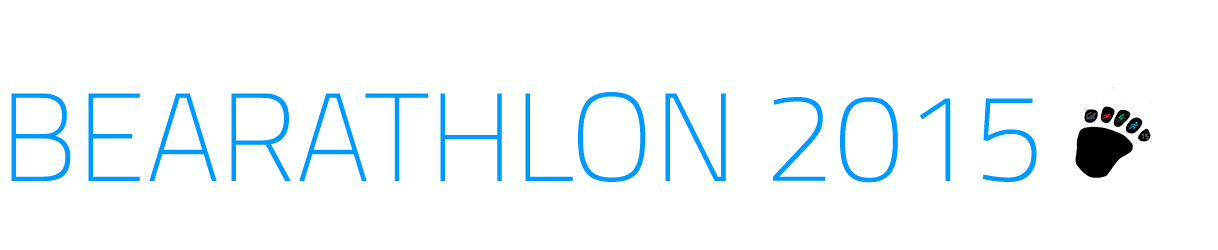
<style>
.page{position:relative;width:1218px;height:250px;background:#ffffff}
.page>*{position:absolute;margin:0}
.t1{font:125px "TitilliumWeb-Thin";color:#0099ff}
</style>
<div class="page">
<p class="t1" style="left:11px;top:92px;width:1026px;height:91px">BEARATHLON 2015</p>
</div>
